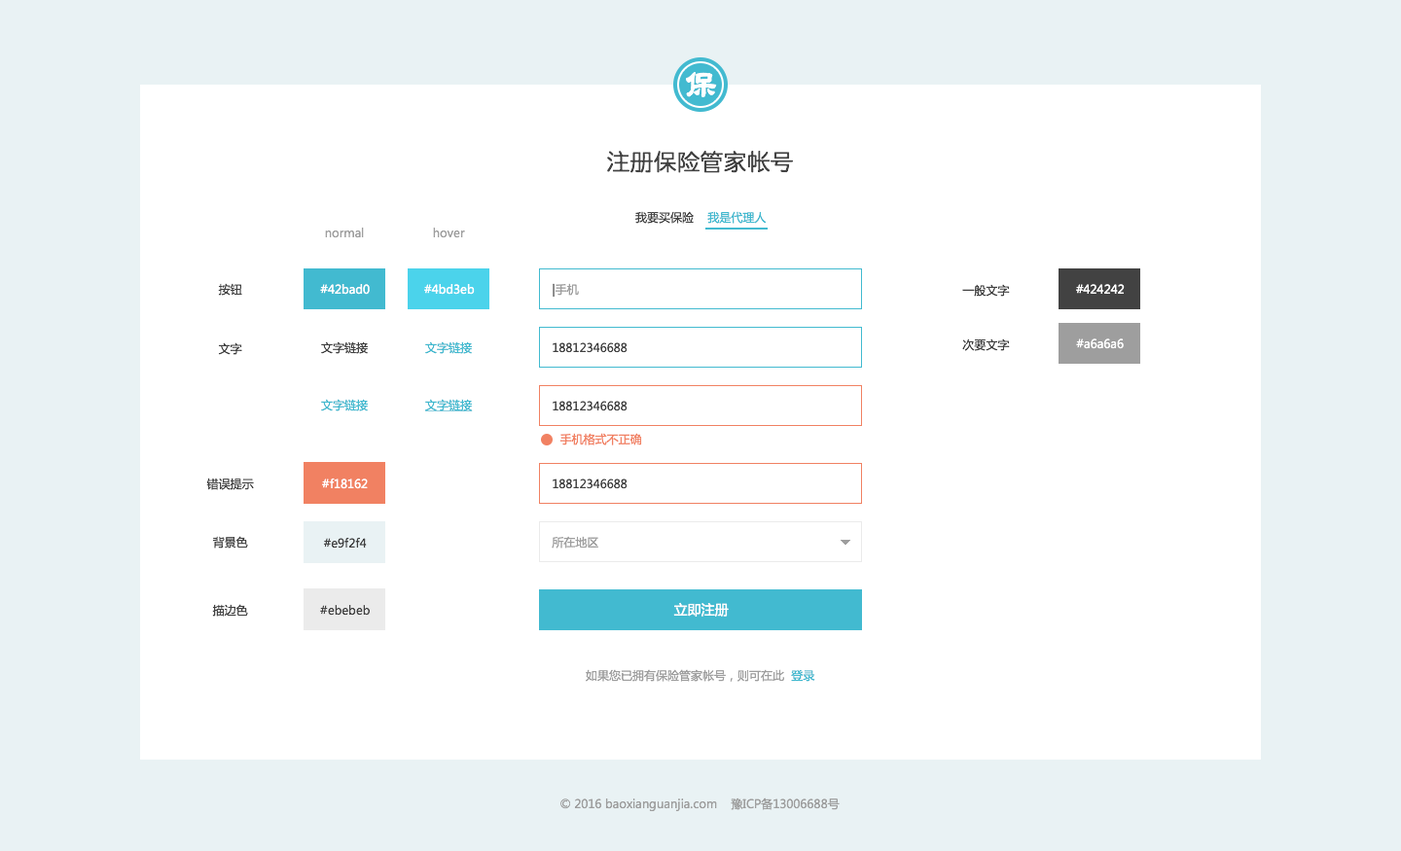
<style>
.page{position:relative;width:1401px;height:851px;background:#ffffff}
.page>*{position:absolute;margin:0}
.t1{font:31.1px "ReishoOtf";color:#ffffff}
.t2{font:23.3px "AaRoundLi";color:#424242}
.t3{font:11.7px "MicrosoftYaHei";color:#424242}
.t4{font:11.7px "MicrosoftYaHei";color:#42bad0}
.t5{font:11.7px "MicrosoftYaHei";color:#9e9e9e}
.t6{font:11.7px "MicrosoftYaHei";color:#ffffff}
.t7{font:11.7px "MicrosoftYaHei";color:#000000}
.t8{font:11.7px "MicrosoftYaHei";color:#42bad0;text-decoration:underline}
.t9{font:11.7px "MicrosoftYaHei";color:#f18162}
.t10{font:13.6px "MicrosoftYaHei";color:#ffffff}
</style>
<div class="page">
<p class="t1" style="left:686px;top:72px;width:31px;height:25px">保</p>
<p class="t2" style="left:607px;top:151px;width:186px;height:22px">注册保险管家帐号</p>
<p class="t3" style="left:635px;top:211px;width:132px;height:13px">我要买保险    <span class="t4">我是代理人</span></p>
<p class="t5" style="left:325px;top:228px;width:39px;height:10px">normal</p>
<p class="t5" style="left:433px;top:228px;width:32px;height:10px">hover</p>
<p class="t3" style="left:218px;top:283px;width:24px;height:13px">按钮</p>
<p class="t6" style="left:320px;top:284px;width:50px;height:11px">#42bad0</p>
<p class="t6" style="left:424px;top:284px;width:51px;height:11px">#4bd3eb</p>
<p class="t5" style="left:553px;top:283px;width:26px;height:14px"><span class="t7">|</span>手机</p>
<p class="t3" style="left:962px;top:284px;width:48px;height:13px">一般文字</p>
<p class="t6" style="left:1076px;top:284px;width:49px;height:10px">#424242</p>
<p class="t3" style="left:321px;top:341px;width:47px;height:13px">文字链接</p>
<p class="t4" style="left:425px;top:341px;width:47px;height:13px">文字链接</p>
<p class="t3" style="left:962px;top:339px;width:48px;height:12px">次要文字</p>
<p class="t6" style="left:1076px;top:339px;width:48px;height:10px">#a6a6a6</p>
<p class="t3" style="left:218px;top:342px;width:24px;height:13px">文字</p>
<p class="t3" style="left:553px;top:342px;width:74px;height:11px">18812346688</p>
<p class="t4" style="left:321px;top:399px;width:47px;height:13px">文字链接</p>
<p class="t8" style="left:425px;top:399px;width:48px;height:13px">文字链接</p>
<p class="t3" style="left:553px;top:401px;width:74px;height:11px">18812346688</p>
<p class="t9" style="left:559px;top:433px;width:83px;height:13px">手机格式不正确</p>
<p class="t3" style="left:206px;top:478px;width:48px;height:12px">错误提示</p>
<p class="t6" style="left:322px;top:478px;width:46px;height:11px">#f18162</p>
<p class="t3" style="left:553px;top:479px;width:74px;height:10px">18812346688</p>
<p class="t3" style="left:212px;top:536px;width:36px;height:13px">背景色</p>
<p class="t3" style="left:323px;top:537px;width:44px;height:12px">#e9f2f4</p>
<p class="t5" style="left:552px;top:536px;width:46px;height:13px">所在地区</p>
<p class="t3" style="left:212px;top:604px;width:36px;height:13px">描边色</p>
<p class="t3" style="left:320px;top:605px;width:50px;height:11px">#ebebeb</p>
<p class="t10" style="left:673px;top:602px;width:56px;height:15px">立即注册</p>
<p class="t5" style="left:586px;top:669px;width:229px;height:13px">如果您已拥有保险管家帐号，则可在此  <span class="t4">登录</span></p>
<p class="t5" style="left:560px;top:798px;width:280px;height:13px">© 2016 baoxianguanjia.com    豫ICP备13006688号</p>
</div>
